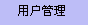
<style>
.page{position:relative;width:88px;height:25px;background:#bdbdf7}
.page>*{position:absolute;margin:0}
.t1{font:12px "SimSun";color:#070000}
</style>
<div class="page">
<p class="t1" style="left:18px;top:5px;width:47px;height:11px">用户管理</p>
</div>
